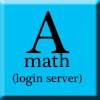
<style>
.page{position:relative;width:100px;height:100px;background:#00bff3}
.page>*{position:absolute;margin:0}
.t1{font:60px "PlantagenetCherokee";color:#000000}
.t2{font:20px "PlantagenetCherokee";color:#000000}
.t3{font:12px "PlantagenetCherokee";color:#000000}
</style>
<div class="page">
<p class="t1" style="left:26px;top:11px;width:44px;height:43px">A</p>
<p class="t2" style="left:24px;top:53px;width:46px;height:15px">math</p>
<p class="t3" style="left:12px;top:73px;width:70px;height:13px">(login server)</p>
</div>
